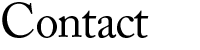
<style>
.page{position:relative;width:200px;height:50px;background:#ffffff}
.page>*{position:absolute;margin:0}
.t1{font:48px "ACaslonPro-Regular";letter-spacing:-0.025em;color:#000000}
</style>
<div class="page">
<p class="t1" style="left:2px;top:2px;width:147px;height:36px">Contact</p>
</div>
